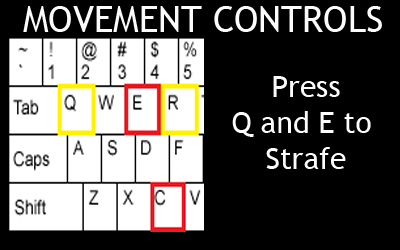
<style>
.page{position:relative;width:400px;height:250px;background:#000000}
.page>*{position:absolute;margin:0}
.t1{font:36px "TrebuchetMS";color:#fcfcfc}
.t2{font:30px "TrebuchetMS";color:#fcfcfc}
</style>
<div class="page">
<p class="t1" style="left:23px;top:6px;width:359px;height:26px">MOVEMENT CONTROLS</p>
<p class="t2" style="left:232px;top:76px;width:139px;height:93px;text-align:center">Press<br>Q and E to <br>Strafe</p>
</div>
